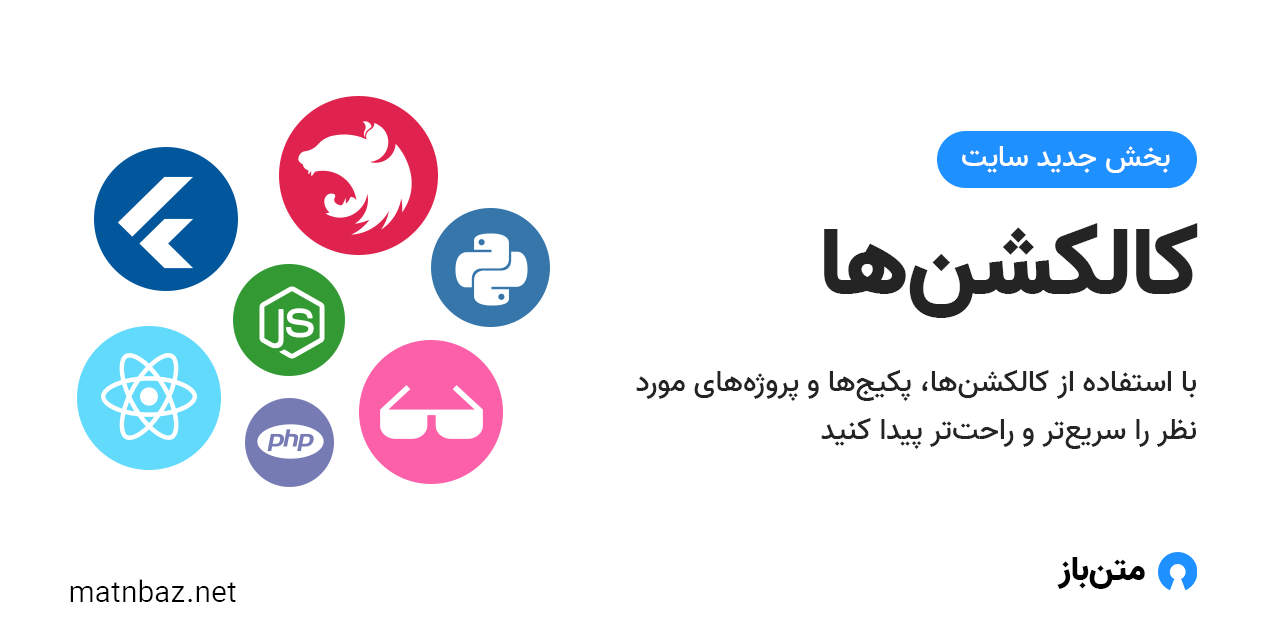
<style>
.page{position:relative;width:1280px;height:640px;background:#ffffff}
.page>*{position:absolute;margin:0}
.t1{font:30px "Vazir-Medium";color:#ffffff}
.t2{font:95.4px "Vazir-Black";color:#242424}
.t3{font:30px/48px "Vazir-Medium";color:#242424}
.t4{font:34.2px "Vazir-Black";color:#000000}
.t5{font:30px "Vazir-Light";color:#000000}
</style>
<div class="page">
<p class="t1" style="left:962px;top:146px;width:208px;height:27px">بخش جدید سایت</p>
<p class="t2" style="left:824px;top:223px;width:374px;height:95px">کالکشن‌ها</p>
<p class="t3" style="left:636px;top:370px;width:560px;height:79px;text-align:right">با استفاده از کالکشن‌ها، پکیج‌ها و پروژه‌های مورد نظر را سریع‌تر و راحت‌تر پیدا کنید</p>
<p class="t4" style="left:1057px;top:557px;width:88px;height:32px">متن‌باز</p>
<p class="t5" style="left:70px;top:579px;width:166px;height:23px">matnbaz.net</p>
</div>
